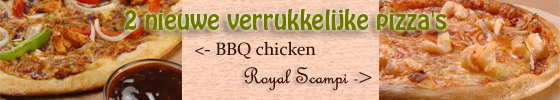
<style>
.page{position:relative;width:560px;height:100px}
.page>*{position:absolute;margin:0}
.t1{font:24px "HoboStd";color:#6c7601}
.t2{font:18px "Constantia";color:#2c1209}
.t3{font:24px "FrenchScriptMT";color:#4f0702}
</style>
<div class="page">
<p class="t1" style="left:125px;top:9px;width:322px;height:21px">2 nieuwe verrukkelijke pizza's</p>
<p class="t2" style="left:195px;top:41px;width:121px;height:18px">&lt;- BBQ chicken</p>
<p class="t3" style="left:244px;top:67px;width:128px;height:24px">Royal Scampi -&gt;</p>
</div>
